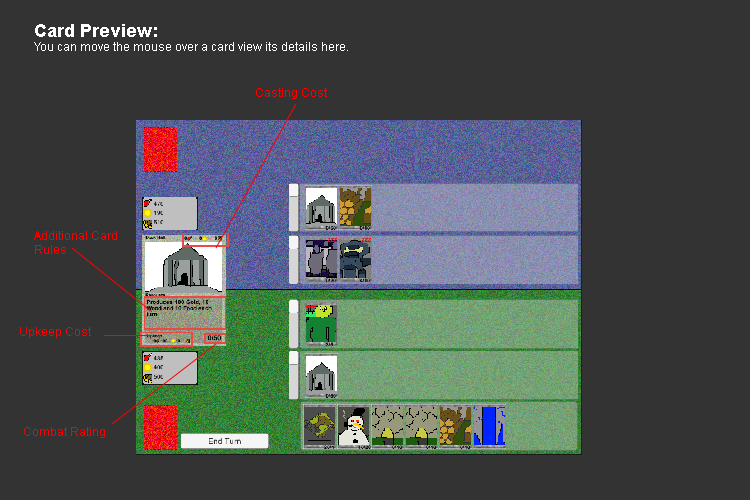
<style>
.page{position:relative;width:750px;height:500px;background:#333333}
.page>*{position:absolute;margin:0}
.t1{font:12px "ArialMT";color:#ffffff}
.t2{font:18px "Arial-BoldMT";color:#ffffff}
.t3{font:12px "ArialMT";color:#ff0000}
</style>
<div class="page">
<p class="t1" style="left:34px;top:24px;width:314px;height:27px"><span class="t2">Card Preview:<br></span>You can move the mouse over a card view its details here.</p>
<p class="t3" style="left:256px;top:88px;width:71px;height:11px">Casting Cost</p>
<p class="t3" style="left:34px;top:231px;width:83px;height:23px">Additional Card<br>Rules</p>
<p class="t3" style="left:20px;top:327px;width:71px;height:11px">Upkeep Cost</p>
<p class="t3" style="left:24px;top:427px;width:81px;height:11px">Combat Rating</p>
</div>
